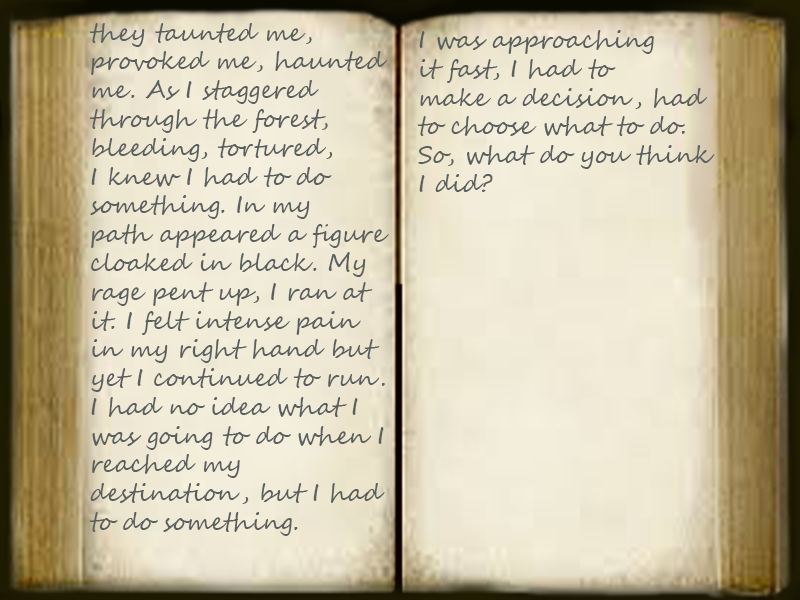
<style>
.page{position:relative;width:800px;height:600px}
.page>*{position:absolute;margin:0}
.t1{font:24px "SegoeScript";color:#5a5f5f}
</style>
<div class="page">
<p class="t1" style="left:89px;top:23px;width:300px;height:513px">they taunted me, <br>provoked me, haunted<br>me. As I staggered <br>through the forest, <br>bleeding, tortured, <br>I knew I had to do <br>something. In my<br>path appeared a figure<br>cloaked in black. My<br>rage pent up, I ran at <br>it. I felt intense pain<br>in my right hand but<br>yet I continued to run.<br>I had no idea what I<br>was going to do when I<br>reached my<br>destination, but I had<br>to do something.</p>
<p class="t1" style="left:417px;top:30px;width:298px;height:162px">I was approaching<br>it fast, I had to <br>make a decision, had<br>to choose what to do.<br>So, what do you think<br>I did?</p>
</div>
